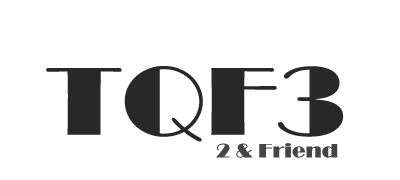
<style>
.page{position:relative;width:400px;height:180px;background:#ffffff}
.page>*{position:absolute;margin:0}
.t1{font:100px "Broadway";color:#282828;scale:1.1 1}
.t2{font:20px "Broadway";color:#454545;scale:1.1 1}
</style>
<div class="page">
<p class="t1" style="left:46px;top:66px;width:298px;height:76px">TQF3</p>
<p class="t2" style="left:216px;top:143px;width:122px;height:15px">2 &amp; Friend</p>
</div>
